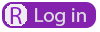
<style>
.page{position:relative;width:100px;height:32px;background:#8421ae}
.page>*{position:absolute;margin:0}
.t1{font:25px "MyriadPro-Regular";color:#941cc7}
.t2{font:20.8px "MyriadPro-Regular";color:#e1dbe4}
</style>
<div class="page">
<p class="t1" style="left:10px;top:7px;width:12px;height:17px">R</p>
<p class="t2" style="left:35px;top:8px;width:51px;height:18px">Log in</p>
</div>
